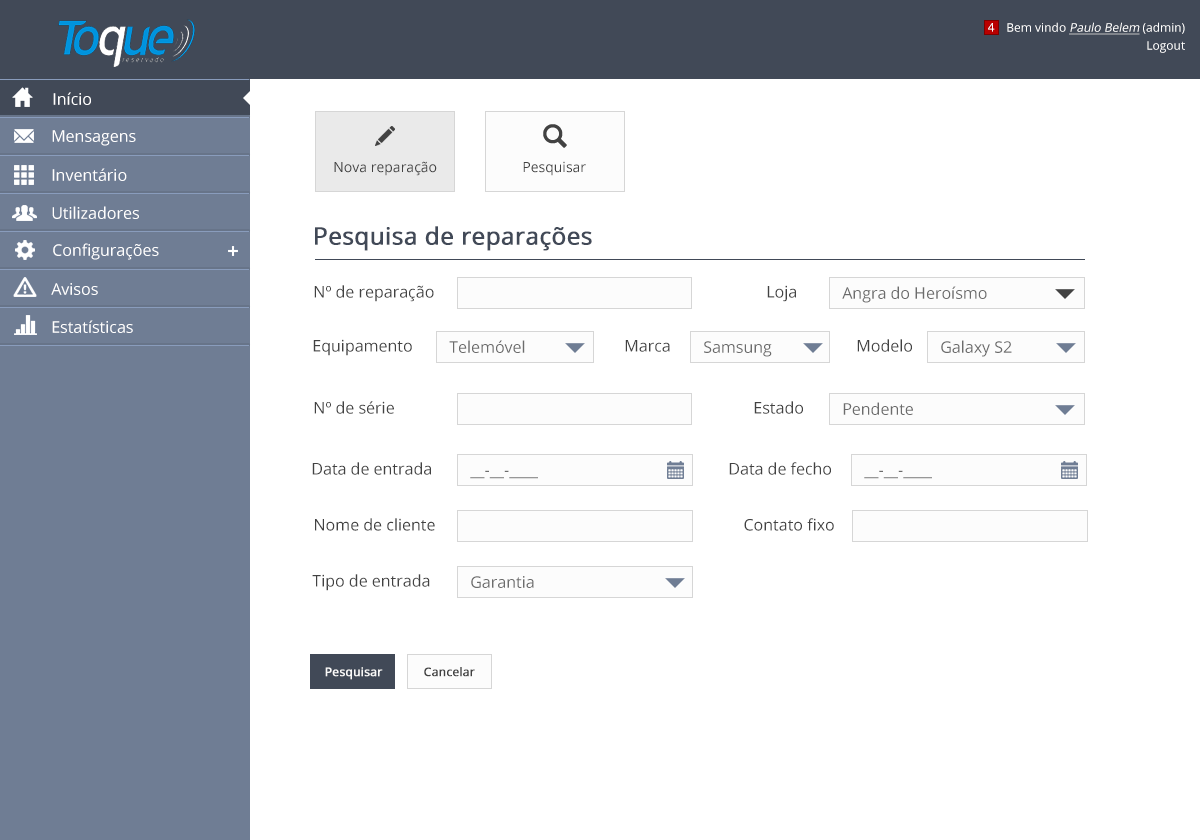
<style>
.page{position:relative;width:1200px;height:840px;background:#ffffff}
.page>*{position:absolute;margin:0}
.t1{font:12px "OpenSans";color:#ffffff}
.t2{font:12px "OpenSans";color:#ffffff;font-style:italic;text-decoration:underline}
.t3{font:16px "OpenSans";color:#ffffff}
.t4{font:14px "OpenSans";color:#424242}
.t5{font:24px "OpenSans";color:#414957;font-weight:bold}
.t6{font:16px "OpenSans";color:#424242}
.t7{font:16px "OpenSans";color:#6c6c6c}
.t8{font:12px "OpenSans";color:#f9f9f9;font-weight:bold}
.t9{font:12px "OpenSans";color:#424242;font-weight:bold}
</style>
<div class="page">
<p class="t1" style="left:988px;top:23px;width:7px;height:9px">4</p>
<p class="t2" style="left:1007px;top:22px;width:178px;height:13px"><span class="t1">Bem vindo </span>Paulo Belem<span class="t1"> (admin)</span></p>
<p class="t1" style="left:1147px;top:41px;width:38px;height:12px">Logout</p>
<p class="t3" style="left:53px;top:92px;width:38px;height:13px">Início</p>
<p class="t3" style="left:52px;top:130px;width:84px;height:16px">Mensagens</p>
<p class="t4" style="left:334px;top:161px;width:103px;height:15px">Nova reparação</p>
<p class="t4" style="left:523px;top:161px;width:63px;height:15px">Pesquisar</p>
<p class="t3" style="left:52px;top:168px;width:75px;height:13px">Inventário</p>
<p class="t3" style="left:52px;top:206px;width:87px;height:13px">Utilizadores</p>
<p class="t5" style="left:315px;top:226px;width:277px;height:25px">Pesquisa de reparações</p>
<p class="t3" style="left:53px;top:243px;width:106px;height:17px">Configurações</p>
<p class="t3" style="left:51px;top:283px;width:47px;height:12px">Avisos</p>
<p class="t6" style="left:314px;top:285px;width:120px;height:17px">Nº de reparação</p>
<p class="t6" style="left:767px;top:285px;width:29px;height:17px">Loja</p>
<p class="t7" style="left:842px;top:286px;width:145px;height:17px">Angra do Heroísmo</p>
<p class="t3" style="left:52px;top:320px;width:81px;height:13px">Estatísticas</p>
<p class="t6" style="left:313px;top:339px;width:99px;height:17px">Equipamento</p>
<p class="t7" style="left:449px;top:340px;width:76px;height:13px">Telemóvel</p>
<p class="t6" style="left:625px;top:340px;width:45px;height:12px">Marca</p>
<p class="t7" style="left:704px;top:341px;width:68px;height:16px">Samsung</p>
<p class="t6" style="left:857px;top:339px;width:55px;height:13px">Modelo</p>
<p class="t7" style="left:941px;top:340px;width:71px;height:17px">Galaxy S2</p>
<p class="t6" style="left:314px;top:401px;width:80px;height:13px">Nº de série</p>
<p class="t6" style="left:754px;top:401px;width:49px;height:13px">Estado</p>
<p class="t7" style="left:843px;top:402px;width:70px;height:13px">Pendente</p>
<p class="t6" style="left:312px;top:462px;width:119px;height:13px">Data de entrada</p>
<p class="t6" style="left:729px;top:462px;width:102px;height:13px">Data de fecho</p>
<p class="t7" style="left:470px;top:470px;width:68px;height:9px">__-__-____</p>
<p class="t7" style="left:864px;top:470px;width:68px;height:9px">__-__-____</p>
<p class="t6" style="left:315px;top:518px;width:120px;height:13px">Nome de cliente</p>
<p class="t6" style="left:744px;top:518px;width:90px;height:13px">Contato fixo</p>
<p class="t6" style="left:312px;top:574px;width:118px;height:17px">Tipo de entrada</p>
<p class="t7" style="left:471px;top:576px;width:63px;height:12px">Garantia</p>
<p class="t8" style="left:325px;top:667px;width:58px;height:13px">Pesquisar</p>
<p class="t9" style="left:424px;top:667px;width:51px;height:10px">Cancelar</p>
</div>
